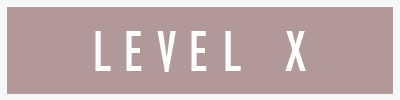
<style>
.page{position:relative;width:400px;height:100px;background:#b19999}
.page>*{position:absolute;margin:0}
.t1{font:60px "GillSansMT-Condensed";letter-spacing:0.2em;color:#ffffff}
</style>
<div class="page">
<p class="t1" style="left:95px;top:31px;width:211px;height:41px">LEVEL X</p>
</div>
